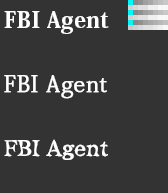
<style>
.page{position:relative;width:168px;height:193px;background:#333333}
.page>*{position:absolute;margin:0}
.t1{font:22px/64px "KozMinPro-Heavy";letter-spacing:0.022em;color:#ffffff}
.t2{font:22px/64px "AdobeFangsongStd-Regular";letter-spacing:0.028em;color:#ffffff;font-weight:bold}
.t3{font:22px/64px "ComicMysteryStd-DB";letter-spacing:-0.006em;color:#ffffff}
</style>
<div class="page">
<p class="t1" style="left:4px;top:11px;width:105px;height:149px">FBI Agent<br><span class="t2">FBI Agent<br></span><span class="t3">FBI Agent</span></p>
</div>
